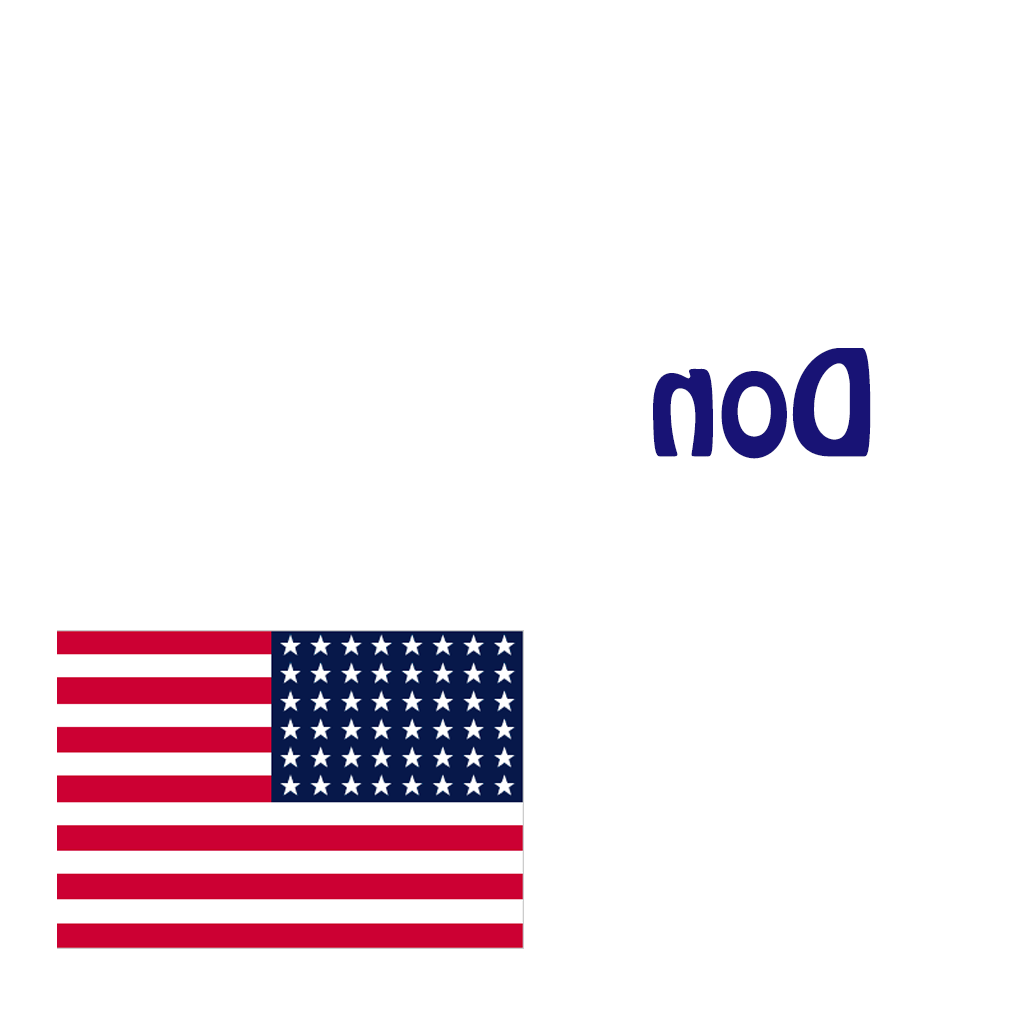
<style>
.page{position:relative;width:1024px;height:1024px;background:#ffffff}
.page>*{position:absolute;margin:0}
.t1{font:130px "HoboStd";color:#181375}
</style>
<div class="page">
<p class="t1" style="left:653px;top:348px;width:218px;height:111px;rotate:180deg">Don</p>
</div>
